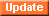
<style>
.page{position:relative;width:49px;height:16px;background:#ff732e}
.page>*{position:absolute;margin:0}
.t1{font:11px "Arial-BoldMT";color:#ffffff}
</style>
<div class="page">
<p class="t1" style="left:6px;top:3px;width:37px;height:10px">Update</p>
</div>
